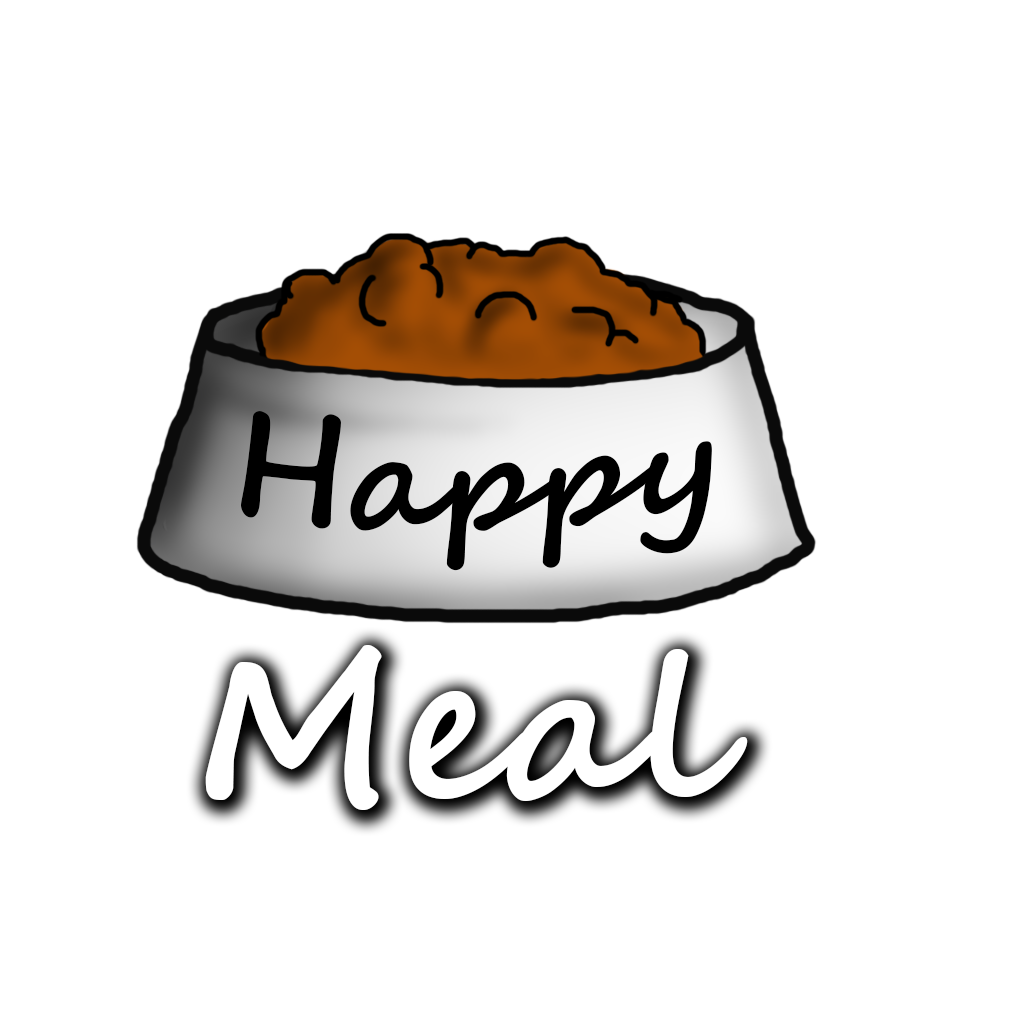
<style>
.page{position:relative;width:1024px;height:1024px;background:#ffffff}
.page>*{position:absolute;margin:0}
.t1{font:141.7px "SegoeScript-Bold";color:#000000}
.t2{font:200px "SegoeScript-Bold";color:#ffffff}
</style>
<div class="page">
<p class="t1" style="left:241px;top:411px;width:471px;height:160px">Happy</p>
<p class="t2" style="left:205px;top:645px;width:543px;height:165px">Meal</p>
</div>
